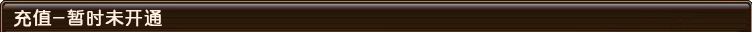
<style>
.page{position:relative;width:752px;height:32px}
.page>*{position:absolute;margin:0}
.t1{font:18px "HYe3gj";letter-spacing:0.05em;color:#ffeee1;font-weight:bold}
</style>
<div class="page">
<p class="t1" style="left:14px;top:9px;width:148px;height:18px">充值-暂时未开通</p>
</div>
